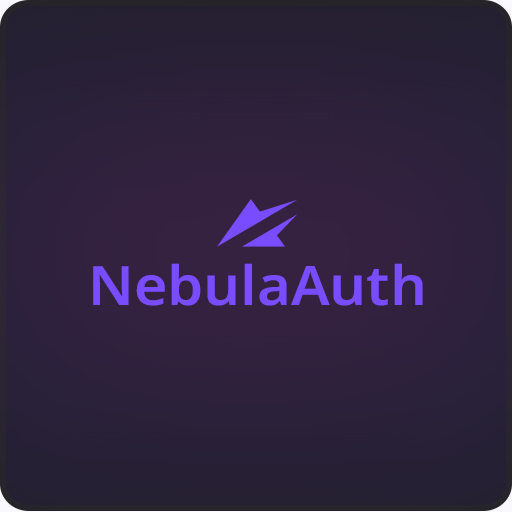
<style>
.page{position:relative;width:512px;height:512px}
.page>*{position:absolute;margin:0}
.t1{font:54.4px "NotoSans-SemiBold";color:#794dff;scale:1.06 1}
</style>
<div class="page">
<p class="t1" style="left:93px;top:263px;width:330px;height:43px">NebulaAuth</p>
</div>
